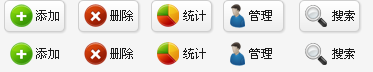
<style>
.page{position:relative;width:373px;height:72px;background:#f5f5f5}
.page>*{position:absolute;margin:0}
.t1{font:12px "SimSun";color:#1b1b1b}
</style>
<div class="page">
<p class="t1" style="left:36px;top:10px;width:23px;height:11px">添加</p>
<p class="t1" style="left:110px;top:10px;width:23px;height:11px">删除</p>
<p class="t1" style="left:183px;top:10px;width:23px;height:11px">统计</p>
<p class="t1" style="left:249px;top:10px;width:23px;height:11px">管理</p>
<p class="t1" style="left:332px;top:10px;width:23px;height:11px">搜索</p>
<p class="t1" style="left:36px;top:48px;width:23px;height:11px">添加</p>
<p class="t1" style="left:110px;top:48px;width:23px;height:11px">删除</p>
<p class="t1" style="left:183px;top:48px;width:23px;height:11px">统计</p>
<p class="t1" style="left:249px;top:48px;width:23px;height:11px">管理</p>
<p class="t1" style="left:332px;top:48px;width:23px;height:11px">搜索</p>
</div>
